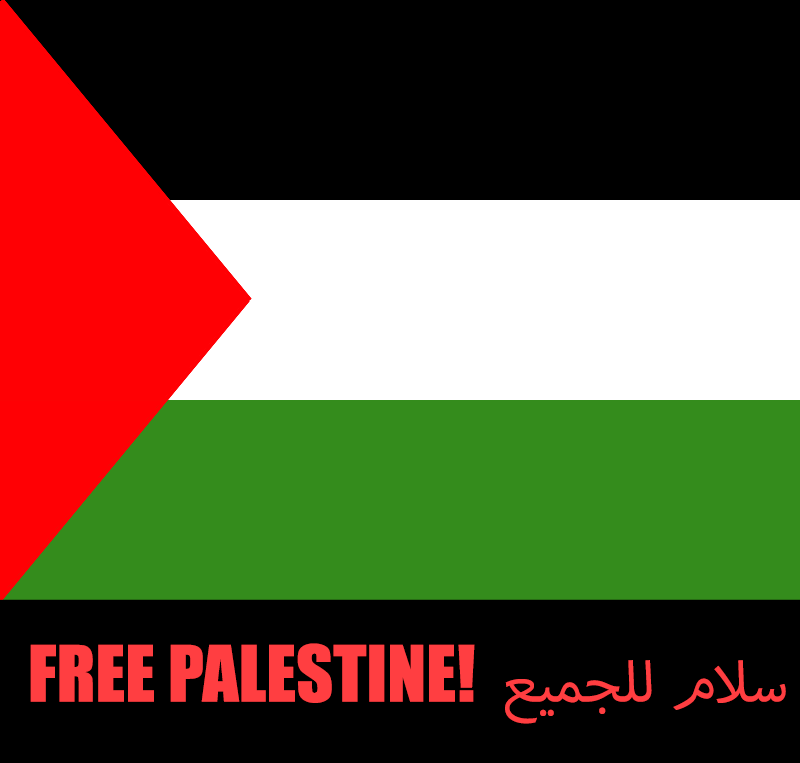
<style>
.page{position:relative;width:800px;height:763px;background:#000000}
.page>*{position:absolute;margin:0}
.t1{font:72px "Impact";color:#ff3e41}
.t2{font:80px "MyriadArabic-Regular";color:#ff3e41}
</style>
<div class="page">
<p class="t1" style="left:30px;top:643px;width:756px;height:81px">FREE PALESTINE!  <span class="t2">سلام للجميع</span></p>
</div>
